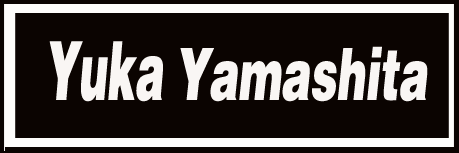
<style>
.page{position:relative;width:459px;height:153px;background:#0b0401}
.page>*{position:absolute;margin:0}
.t1{font:81.2px "Helvetica-BlackOblique";color:#f9f6f4;scale:0.52 1}
.t2{font:72px "Helvetica-BlackOblique";color:#f9f6f4;scale:0.6 1}
</style>
<div class="page">
<p class="t1" style="left:49px;top:41px;width:114px;height:61px">Yuka</p>
<p class="t2" style="left:180px;top:46px;width:248px;height:56px">Yamashita</p>
</div>
